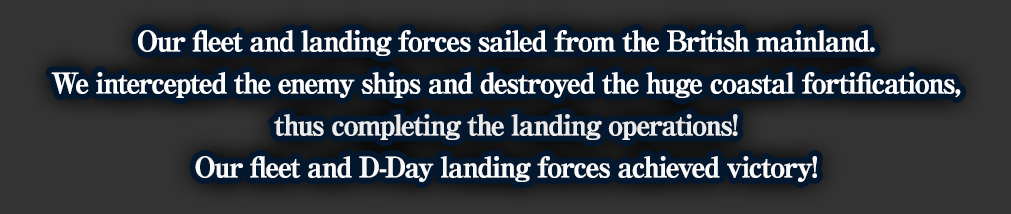
<style>
.page{position:relative;width:1011px;height:214px;background:#333333}
.page>*{position:absolute;margin:0}
.t1{font:28px/42px "RyuminPro-ExBold";letter-spacing:-0.08em;color:#ffffff;font-weight:bold}
</style>
<div class="page">
<p class="t1" style="left:51px;top:30px;width:910px;height:152px;text-align:center">Our fleet and landing forces sailed from the British mainland.<br>We intercepted the enemy ships and destroyed the huge coastal fortifications,<br>thus completing the landing operations!<br>Our fleet and D-Day landing forces achieved victory!</p>
</div>
